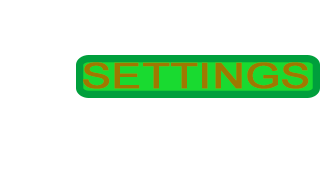
<style>
.page{position:relative;width:320px;height:179px;background:#ffffff}
.page>*{position:absolute;margin:0}
.t1{font:35.4px "ArialMT";color:#9f7800;font-weight:bold;scale:1.25 1}
</style>
<div class="page">
<p class="t1" style="left:83px;top:62px;width:226px;height:27px">SETTINGSGS</p>
</div>
